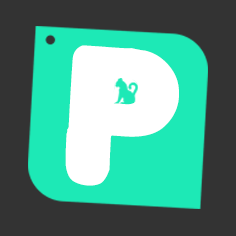
<style>
.page{position:relative;width:236px;height:236px;background:#333333}
.page>*{position:absolute;margin:0}
.t1{font:188.1px "AlphaFridgeMagnets";letter-spacing:0.12em;color:#ffffff;scale:1.05 1}
</style>
<div class="page">
<p class="t1" style="left:65px;top:45px;width:114px;height:141px;rotate:1deg">P</p>
</div>
